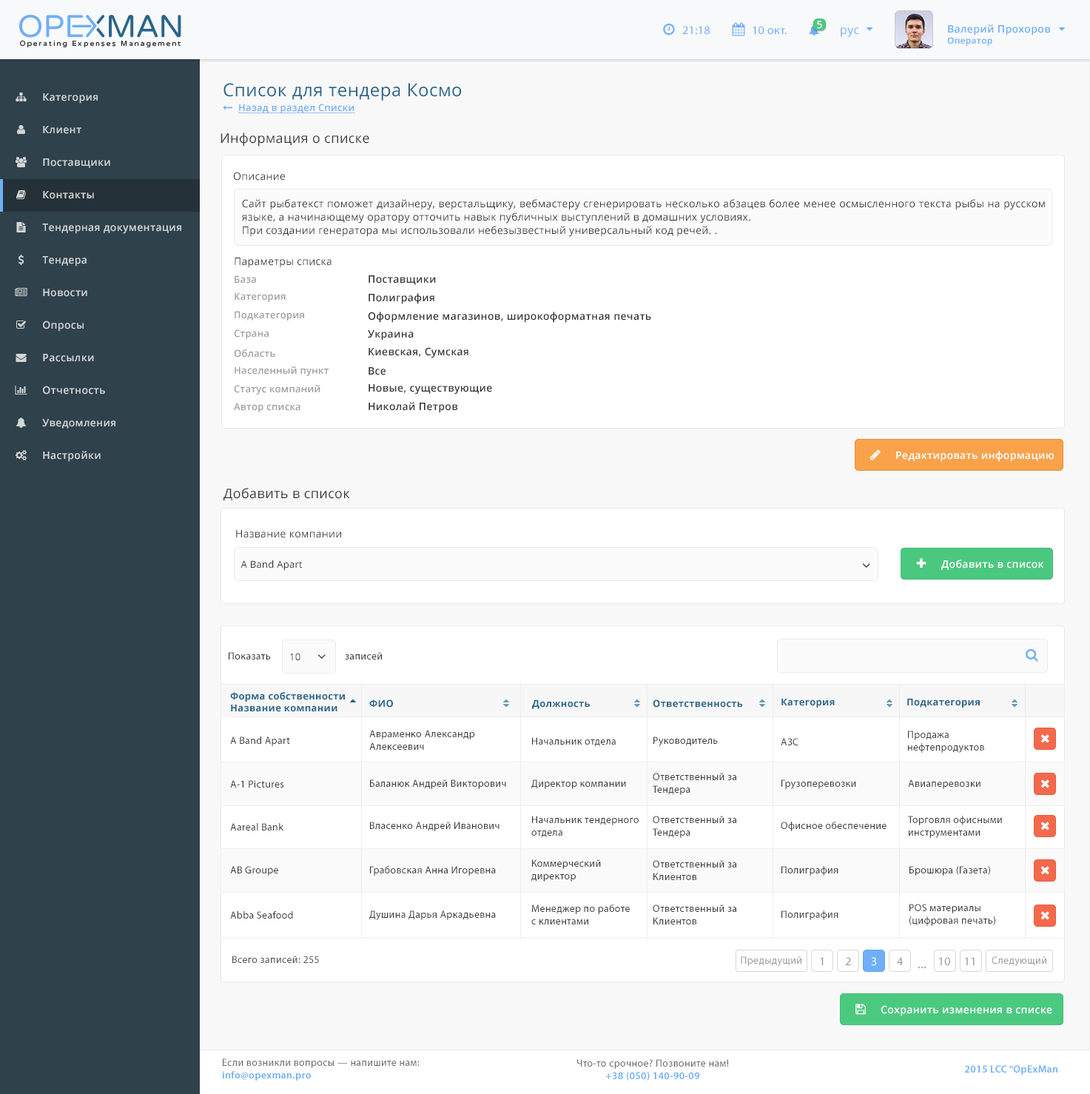
<style>
.page{position:relative;width:1090px;height:1094px;background:#ffffff}
.page>*{position:absolute;margin:0}
.t1{font:11.8px "MyriadPro-Regular";letter-spacing:0.025em;color:#6faff8}
.t2{font:10.3px "OpenSans-Semibold";letter-spacing:0.025em;color:#ffffff}
.t3{font:11.8px "OpenSans";letter-spacing:0.025em;color:#6eaff8}
.t4{font:10.3px "OpenSans-Semibold";letter-spacing:0.025em;color:#6eaef7}
.t5{font:8.8px "OpenSans-Semibold";letter-spacing:0.025em;color:#6eaef7}
.t6{font:17.7px "OpenSans";letter-spacing:0.025em;color:#29658b}
.t7{font:10.3px "OpenSans-Semibold";letter-spacing:0.025em;color:#d2d5d7}
.t8{font:9.6px "OpenSans-Semibold";letter-spacing:0.025em;color:#6faff8;text-decoration:underline}
.t9{font:13.3px "OpenSans";letter-spacing:0.025em;color:#373838}
.t10{font:10.3px "OpenSans";letter-spacing:0.025em;color:#373838}
.t11{font:10.3px/13.3px "OpenSans";letter-spacing:0.025em;color:#333333}
.t12{font:10.3px "OpenSans";letter-spacing:0.025em;color:#333333}
.t13{font:9.6px "OpenSans-Semibold";letter-spacing:0.025em;color:#9e9d9d}
.t14{font:10.3px "OpenSans-Semibold";letter-spacing:0.025em;color:#333333}
.t15{font:13.3px "OpenSans";letter-spacing:0.025em;color:#333333}
.t16{font:9.6px "OpenSans";letter-spacing:0.025em;color:#333333}
.t17{font:10.3px "MyriadPro-Regular";letter-spacing:0.025em;color:#333333}
.t18{font:9.6px "OpenSans-Bold";letter-spacing:0.025em;color:#29668b}
.t19{font:10.3px "MyriadPro-Regular";letter-spacing:0.025em;color:#3a3a3a}
.t20{font:10.3px "MyriadPro-Regular";letter-spacing:0.025em;color:#4c4c4c}
.t21{font:10.3px "MyriadPro-Regular";letter-spacing:0.025em;color:#999999}
.t22{font:11.8px "MyriadPro-Regular";letter-spacing:0.025em;color:#999999}
.t23{font:11.8px "MyriadPro-Regular";letter-spacing:0.025em;color:#ffffff}
.t24{font:13.3px "MyriadPro-Regular";letter-spacing:0.025em;color:#999999}
.t25{font:10.3px "MyriadPro-Regular";letter-spacing:0.025em;color:#696969}
.t26{font:10.3px "MyriadPro-Semibold";letter-spacing:0.025em;color:#6eaef8}
</style>
<div class="page">
<p class="t1" style="left:682px;top:26px;width:28px;height:9px">21:18</p>
<p class="t1" style="left:753px;top:26px;width:34px;height:9px">10 окт.</p>
<p class="t2" style="left:817px;top:21px;width:5px;height:8px">5</p>
<p class="t3" style="left:841px;top:27px;width:18px;height:10px">рус</p>
<p class="t4" style="left:947px;top:24px;width:104px;height:22px">Валерий Прохоров<br><span class="t5">Оператор</span></p>
<p class="t6" style="left:224px;top:83px;width:238px;height:18px">Список для тендера Космо</p>
<p class="t7" style="left:43px;top:93px;width:55px;height:11px">Категория</p>
<p class="t8" style="left:238px;top:104px;width:117px;height:9px">Назад в раздел Списки</p>
<p class="t7" style="left:43px;top:126px;width:38px;height:8px">Клиент</p>
<p class="t9" style="left:221px;top:132px;width:148px;height:15px">Информация о списке</p>
<p class="t7" style="left:43px;top:158px;width:67px;height:10px">Поставщики</p>
<p class="t10" style="left:233px;top:172px;width:52px;height:9px">Описание</p>
<p class="t7" style="left:43px;top:191px;width:51px;height:8px">Контакты</p>
<p class="t11" style="left:242px;top:199px;width:803px;height:38px;text-align:justify">Сайт рыбатекст поможет дизайнеру, верстальщику, вебмастеру сгенерировать несколько абзацев более менее осмысленного текста рыбы на русском языке, а начинающему оратору отточить навык публичных выступлений в домашних условиях.<br>При создании генератора мы использовали небезызвестный универсальный код речей. .</p>
<p class="t7" style="left:42px;top:224px;width:139px;height:10px">Тендерная документация</p>
<p class="t7" style="left:42px;top:256px;width:45px;height:10px">Тендера</p>
<p class="t12" style="left:235px;top:258px;width:97px;height:10px">Параметры списка</p>
<p class="t13" style="left:235px;top:275px;width:21px;height:8px">База</p>
<p class="t14" style="left:369px;top:275px;width:67px;height:10px">Поставщики</p>
<p class="t7" style="left:43px;top:289px;width:44px;height:8px">Новости</p>
<p class="t13" style="left:235px;top:292px;width:51px;height:10px">Категория</p>
<p class="t14" style="left:369px;top:293px;width:65px;height:11px">Полиграфия</p>
<p class="t13" style="left:235px;top:311px;width:69px;height:9px">Подкатегория</p>
<p class="t14" style="left:368px;top:312px;width:283px;height:11px">Оформление магазинов, широкоформатная печать</p>
<p class="t7" style="left:43px;top:320px;width:41px;height:12px">Опросы</p>
<p class="t13" style="left:234px;top:329px;width:35px;height:10px">Страна</p>
<p class="t14" style="left:368px;top:330px;width:46px;height:10px">Украина</p>
<p class="t7" style="left:43px;top:354px;width:51px;height:8px">Рассылки</p>
<p class="t13" style="left:234px;top:349px;width:41px;height:8px">Область</p>
<p class="t14" style="left:369px;top:347px;width:99px;height:11px">Киевская, Сумская</p>
<p class="t13" style="left:235px;top:366px;width:94px;height:10px">Населенный пункт</p>
<p class="t14" style="left:369px;top:367px;width:17px;height:8px">Все</p>
<p class="t7" style="left:43px;top:386px;width:62px;height:8px">Отчетность</p>
<p class="t13" style="left:234px;top:385px;width:86px;height:9px">Статус компаний</p>
<p class="t14" style="left:369px;top:384px;width:123px;height:10px">Новые, существующие</p>
<p class="t14" style="left:369px;top:402px;width:89px;height:11px">Николай Петров</p>
<p class="t13" style="left:234px;top:403px;width:66px;height:9px">Автор списка</p>
<p class="t7" style="left:42px;top:419px;width:73px;height:10px">Уведомления</p>
<p class="t7" style="left:43px;top:451px;width:58px;height:11px">Настройки</p>
<p class="t2" style="left:896px;top:451px;width:158px;height:11px">Редактировать информацию</p>
<p class="t15" style="left:224px;top:488px;width:126px;height:13px">Добавить в список</p>
<p class="t10" style="left:236px;top:530px;width:105px;height:8px">Название компании</p>
<p class="t16" style="left:241px;top:560px;width:62px;height:10px">A Band Apart</p>
<p class="t2" style="left:941px;top:560px;width:103px;height:10px">Добавить в список</p>
<p class="t17" style="left:229px;top:652px;width:42px;height:7px">Показать</p>
<p class="t16" style="left:290px;top:653px;width:10px;height:8px">10</p>
<p class="t17" style="left:345px;top:652px;width:37px;height:7px">записей</p>
<p class="t18" style="left:230px;top:692px;width:115px;height:20px">Форма собственности<br>Название компании</p>
<p class="t18" style="left:369px;top:699px;width:24px;height:9px">ФИО</p>
<p class="t18" style="left:532px;top:699px;width:58px;height:10px">Должность</p>
<p class="t18" style="left:653px;top:699px;width:90px;height:9px">Ответственность</p>
<p class="t18" style="left:782px;top:698px;width:53px;height:10px">Категория</p>
<p class="t18" style="left:907px;top:698px;width:73px;height:10px">Подкатегория</p>
<p class="t19" style="left:230px;top:736px;width:60px;height:10px">A Band Apart</p>
<p class="t19" style="left:369px;top:730px;width:106px;height:20px">Авраменко Александр <br>Алексеевич</p>
<p class="t19" style="left:532px;top:737px;width:84px;height:10px">Начальник отдела</p>
<p class="t19" style="left:653px;top:736px;width:65px;height:10px">Руководитель</p>
<p class="t19" style="left:781px;top:738px;width:18px;height:7px">АЗС</p>
<p class="t19" style="left:908px;top:730px;width:76px;height:23px">Продажа <br>нефтепродуктов</p>
<p class="t19" style="left:653px;top:773px;width:83px;height:22px">Ответственный за <br>Тендера</p>
<p class="t19" style="left:230px;top:780px;width:54px;height:7px">A-1 Pictures</p>
<p class="t19" style="left:370px;top:779px;width:136px;height:10px">Баланюк Андрей Викторович</p>
<p class="t19" style="left:531px;top:779px;width:95px;height:10px">Директор компании</p>
<p class="t19" style="left:782px;top:779px;width:74px;height:10px">Грузоперевозки</p>
<p class="t19" style="left:908px;top:779px;width:73px;height:10px">Авиаперевозки</p>
<p class="t19" style="left:370px;top:821px;width:130px;height:10px">Власенко Андрей Иванович</p>
<p class="t19" style="left:531px;top:816px;width:108px;height:22px">Начальник тендерного <br>отдела</p>
<p class="t19" style="left:653px;top:816px;width:83px;height:22px">Ответственный за <br>Тендера</p>
<p class="t19" style="left:781px;top:821px;width:106px;height:10px">Офисное обеспечение</p>
<p class="t19" style="left:908px;top:816px;width:94px;height:22px">Торговля офисными<br>инструментами</p>
<p class="t19" style="left:230px;top:823px;width:53px;height:7px">Aareal Bank</p>
<p class="t19" style="left:230px;top:866px;width:48px;height:10px">AB Groupe</p>
<p class="t19" style="left:370px;top:866px;width:126px;height:10px">Грабовская Анна Игоревна</p>
<p class="t19" style="left:531px;top:859px;width:70px;height:22px">Коммерческий <br>директор</p>
<p class="t19" style="left:653px;top:860px;width:83px;height:20px">Ответственный за <br>Клиентов</p>
<p class="t19" style="left:782px;top:866px;width:57px;height:10px">Полиграфия</p>
<p class="t19" style="left:910px;top:866px;width:80px;height:10px">Брошюра (Газета)</p>
<p class="t19" style="left:531px;top:904px;width:99px;height:20px">Менеджер по работе <br>с клиентами</p>
<p class="t19" style="left:653px;top:904px;width:83px;height:20px">Ответственный за <br>Клиентов</p>
<p class="t19" style="left:910px;top:904px;width:85px;height:22px">POS материалы<br>(цифровая печать)</p>
<p class="t19" style="left:230px;top:911px;width:63px;height:7px">Abba Seafood</p>
<p class="t19" style="left:369px;top:910px;width:127px;height:10px">Душина Дарья Аркадьевна</p>
<p class="t19" style="left:782px;top:910px;width:57px;height:10px">Полиграфия</p>
<p class="t20" style="left:232px;top:955px;width:87px;height:8px">Всего записей: 255</p>
<p class="t21" style="left:741px;top:956px;width:61px;height:10px">Предыдущий</p>
<p class="t22" style="left:820px;top:957px;width:4px;height:8px">1</p>
<p class="t22" style="left:845px;top:957px;width:6px;height:8px">2</p>
<p class="t23" style="left:871px;top:957px;width:6px;height:9px">3</p>
<p class="t22" style="left:897px;top:957px;width:6px;height:8px">4</p>
<p class="t22" style="left:939px;top:957px;width:11px;height:9px">10</p>
<p class="t22" style="left:965px;top:957px;width:10px;height:8px">11</p>
<p class="t21" style="left:992px;top:956px;width:54px;height:10px">Следующий</p>
<p class="t24" style="left:918px;top:967px;width:9px;height:2px">...</p>
<p class="t2" style="left:881px;top:1005px;width:171px;height:11px">Сохранить изменения в списке</p>
<p class="t25" style="left:222px;top:1058px;width:198px;height:23px">Если возникли вопросы — напишите нам:<br><span class="t26">info@opexman.pro</span></p>
<p class="t25" style="left:577px;top:1059px;width:152px;height:22px;text-align:center">Что-то срочное? Позвоните нам!<br><span class="t26">+38 (050) 140-90-09</span></p>
<p class="t26" style="left:965px;top:1065px;width:93px;height:10px">2015 LCC “OpExMan</p>
</div>
